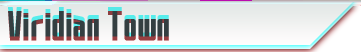
<style>
.page{position:relative;width:361px;height:52px}
.page>*{position:absolute;margin:0}
.t1{font:36px "SAOUI-Regular";color:#343f41;font-weight:bold}
</style>
<div class="page">
<p class="t1" style="left:8px;top:7px;width:161px;height:30px">Viridian Town</p>
</div>
